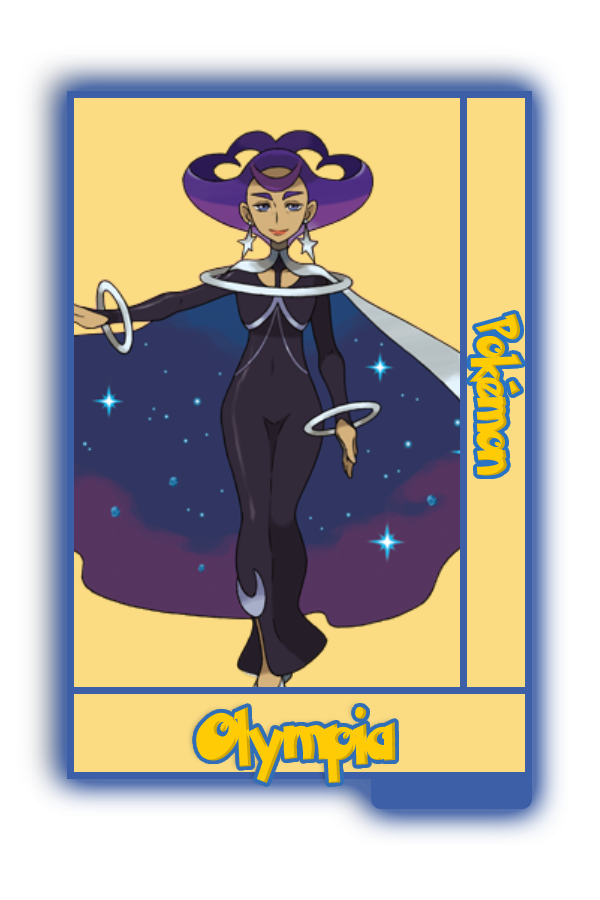
<style>
.page{position:relative;width:600px;height:900px;background:#fbdc83}
.page>*{position:absolute;margin:0}
.t1{font:48.8px "PokemonSolidNormal";color:#ffcb05;scale:0.8 1}
.t2{font:56.6px "PokemonSolidNormal";color:#ffcb05;scale:0.92 1}
</style>
<div class="page">
<p class="t1" style="left:469px;top:313px;width:54px;height:163px;rotate:90deg">Pokémon</p>
<p class="t2" style="left:196px;top:706px;width:200px;height:77px">Olympia</p>
</div>
